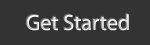
<style>
.page{position:relative;width:150px;height:45px;background:#333333}
.page>*{position:absolute;margin:0}
.t1{font:22px "MyriadPro-Regular"}
</style>
<div class="page">
<p class="t1" style="left:25px;top:13px;width:103px;height:17px">Get Started</p>
</div>
